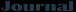
<style>
.page{position:relative;width:76px;height:12px;background:#000000}
.page>*{position:absolute;margin:0}
.t1{font:15.2px "BritannicBold";color:#253947;scale:1.43 1}
</style>
<div class="page">
<p class="t1" style="left:1px;top:1px;width:72px;height:10px">Journal</p>
</div>
